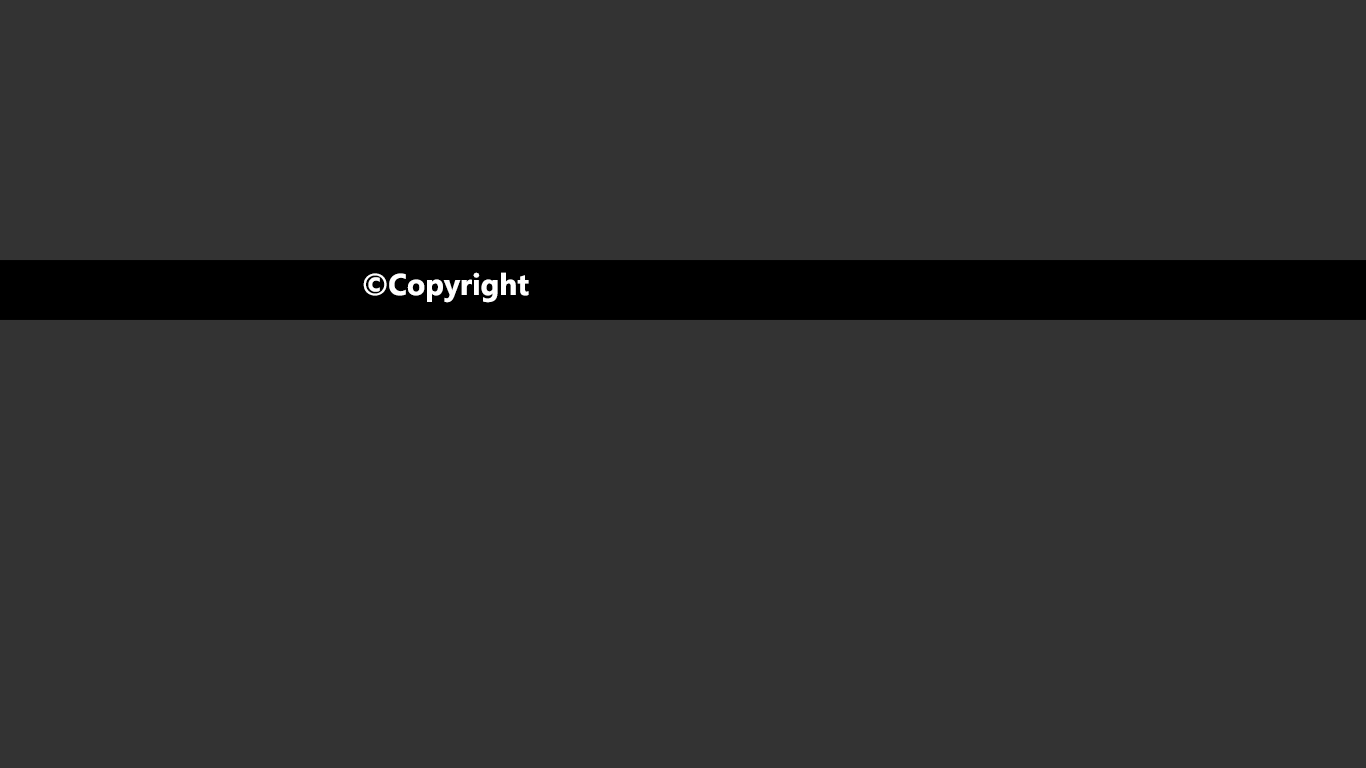
<style>
.page{position:relative;width:1366px;height:768px;background:#333333}
.page>*{position:absolute;margin:0}
.t1{font:30px "SegoeUI-Bold";color:#ffffff}
</style>
<div class="page">
<p class="t1" style="left:363px;top:272px;width:166px;height:31px">©Copyright</p>
</div>
